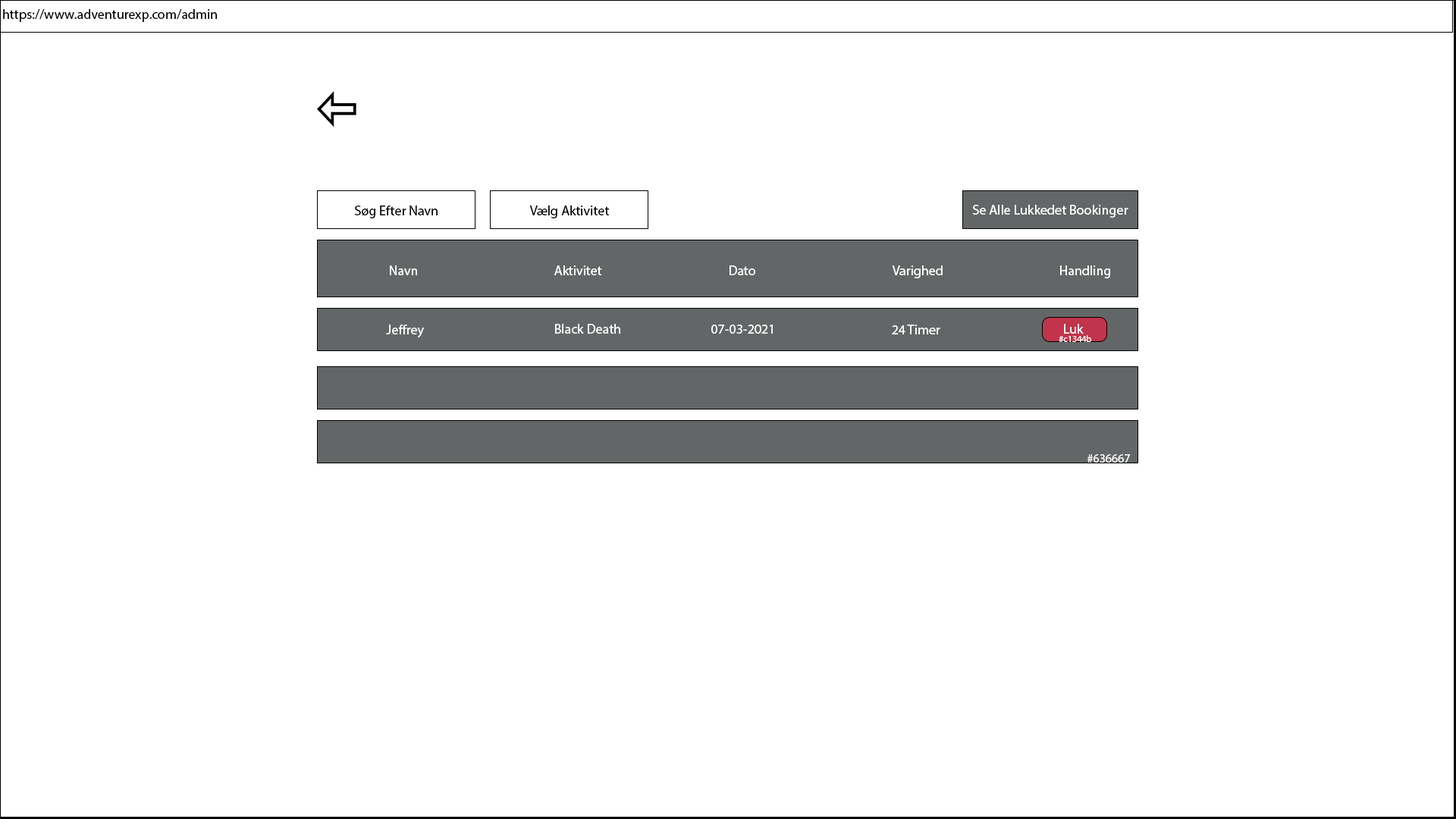
<style>
.page{position:relative;width:1456px;height:819px;background:#ffffff}
.page>*{position:absolute;margin:0}
.t1{font:13.6px "MyriadPro-Regular";color:#000000}
.t2{font:13.6px "MyriadPro-Regular";color:#ffffff}
.t3{font:9.1px "MyriadPro-Regular";color:#ffffff}
.t4{font:12.1px "MyriadPro-Regular";color:#ffffff}
</style>
<div class="page">
<p class="t1" style="left:3px;top:9px;width:214px;height:13px">https://www.adventurexp.com/admin</p>
<p class="t1" style="left:355px;top:206px;width:83px;height:12px">Søg Efter Navn</p>
<p class="t1" style="left:529px;top:206px;width:81px;height:12px">Vælg Aktivitet</p>
<p class="t2" style="left:973px;top:205px;width:155px;height:13px">Se Alle Lukkedet Bookinger</p>
<p class="t2" style="left:390px;top:265px;width:27px;height:10px">Navn</p>
<p class="t2" style="left:554px;top:265px;width:48px;height:10px">Aktivitet</p>
<p class="t2" style="left:730px;top:265px;width:25px;height:10px">Dato</p>
<p class="t2" style="left:892px;top:265px;width:51px;height:13px">Varighed</p>
<p class="t2" style="left:1060px;top:265px;width:50px;height:13px">Handling</p>
<p class="t2" style="left:386px;top:325px;width:38px;height:12px">Jeffrey</p>
<p class="t2" style="left:555px;top:324px;width:65px;height:10px">Black Death</p>
<p class="t2" style="left:711px;top:325px;width:62px;height:9px">07-03-2021</p>
<p class="t2" style="left:892px;top:325px;width:48px;height:9px">24 Timer</p>
<p class="t2" style="left:1064px;top:324px;width:20px;height:10px">Luk</p>
<p class="t3" style="left:1059px;top:335px;width:32px;height:7px">#c1344b</p>
<p class="t4" style="left:1087px;top:454px;width:43px;height:9px">#636667</p>
</div>
